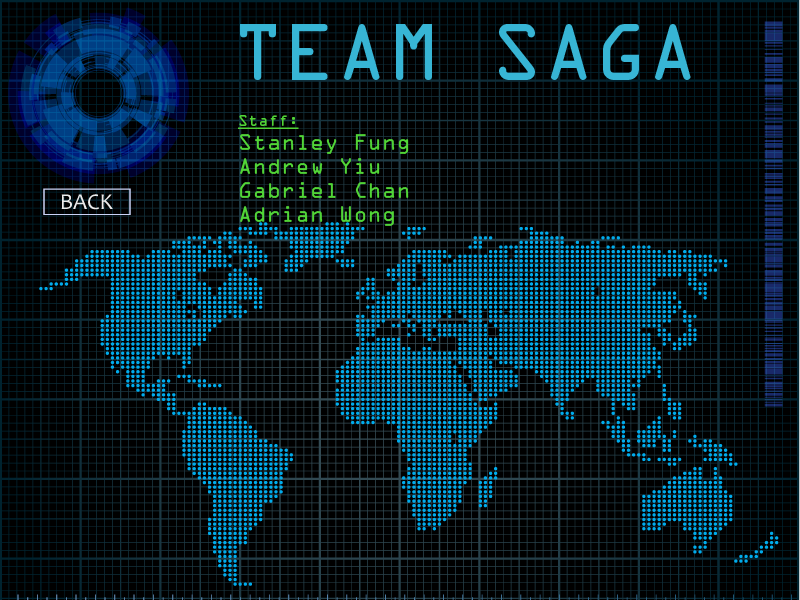
<style>
.page{position:relative;width:800px;height:600px;background:#000000}
.page>*{position:absolute;margin:0}
.t1{font:72px "OCRAStd";color:#37b5d5}
.t2{font:20px "OCRAStd";color:#51d537}
.t3{font:14px "OCRAStd";color:#51d537;text-decoration:underline}
</style>
<div class="page">
<p class="t1" style="left:240px;top:24px;width:451px;height:56px">TEAM SAGA</p>
<p class="t2" style="left:238px;top:115px;width:171px;height:111px"><span class="t3">Staff:<br></span>Stanley Fung<br>Andrew Yiu<br>Gabriel Chan<br>Adrian Wong</p>
</div>
